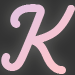
<style>
.page{position:relative;width:75px;height:75px}
.page>*{position:absolute;margin:0}
.t1{font:78.4px "Bumbbled";color:#f1c4d5}
</style>
<div class="page">
<p class="t1" style="left:1px;top:4px;width:74px;height:70px">K</p>
</div>
